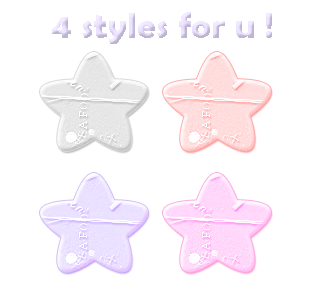
<style>
.page{position:relative;width:330px;height:300px;background:#ffffff}
.page>*{position:absolute;margin:0}
.t1{font:36px "BerlinSansFBDemi-Bold"}
</style>
<div class="page">
<p class="t1" style="left:52px;top:12px;width:220px;height:32px">4 styles for u !</p>
</div>
